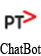
<style>
.page{position:relative;width:41px;height:56px;background:#ffffff}
.page>*{position:absolute;margin:0}
.t1{font:16.3px "IskoolaPota";color:#000000;scale:0.75 1}
</style>
<div class="page">
<p class="t1" style="left:0px;top:43px;width:41px;height:11px">ChatBot</p>
</div>
